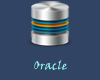
<style>
.page{position:relative;width:100px;height:80px;background:#324464}
.page>*{position:absolute;margin:0}
.t1{font:12px "VinerHandITC";color:#95feee}
</style>
<div class="page">
<p class="t1" style="left:34px;top:60px;width:34px;height:10px">Oracle</p>
</div>
